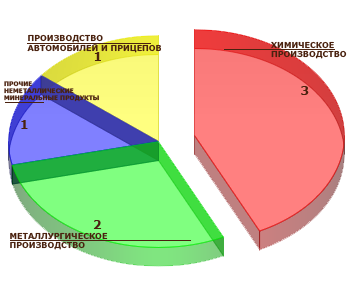
<style>
.page{position:relative;width:358px;height:284px;background:#ffffff}
.page>*{position:absolute;margin:0}
.t1{font:8px "Verdana-Bold";color:#4a220f}
.t2{font:6px "Verdana-Bold";color:#4a220f}
</style>
<div class="page">
<p class="t1" style="left:27px;top:34px;width:134px;height:19px">ПРОИЗВОДСТВО<br>АВТОМОБИЛЕЙ И ПРИЦЕПОВ</p>
<p class="t1" style="left:271px;top:41px;width:76px;height:18px">ХИМИЧЕСКОЕ <br>ПРОИЗВОДСТВО</p>
<p class="t2" style="left:4px;top:81px;width:95px;height:21px">ПРОЧИЕ<br>НЕМЕТАЛЛИЧЕСКИЕ<br>МИНЕРАЛЬНЫЕ ПРОДУКТЫ</p>
<p class="t1" style="left:10px;top:232px;width:98px;height:18px">МЕТАЛЛУРГИЧЕСКОЕ <br>ПРОИЗВОДСТВО</p>
</div>
